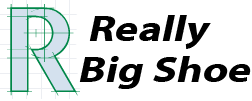
<style>
.page{position:relative;width:252px;height:101px;background:#ffffff}
.page>*{position:absolute;margin:0}
.t1{font:36px "MyriadWebPro-Bold";color:#000000;font-style:italic;scale:1.2 1}
</style>
<div class="page">
<p class="t1" style="left:89px;top:15px;width:122px;height:34px">Really</p>
<p class="t1" style="left:79px;top:56px;width:172px;height:33px">Big Shoe</p>
</div>
